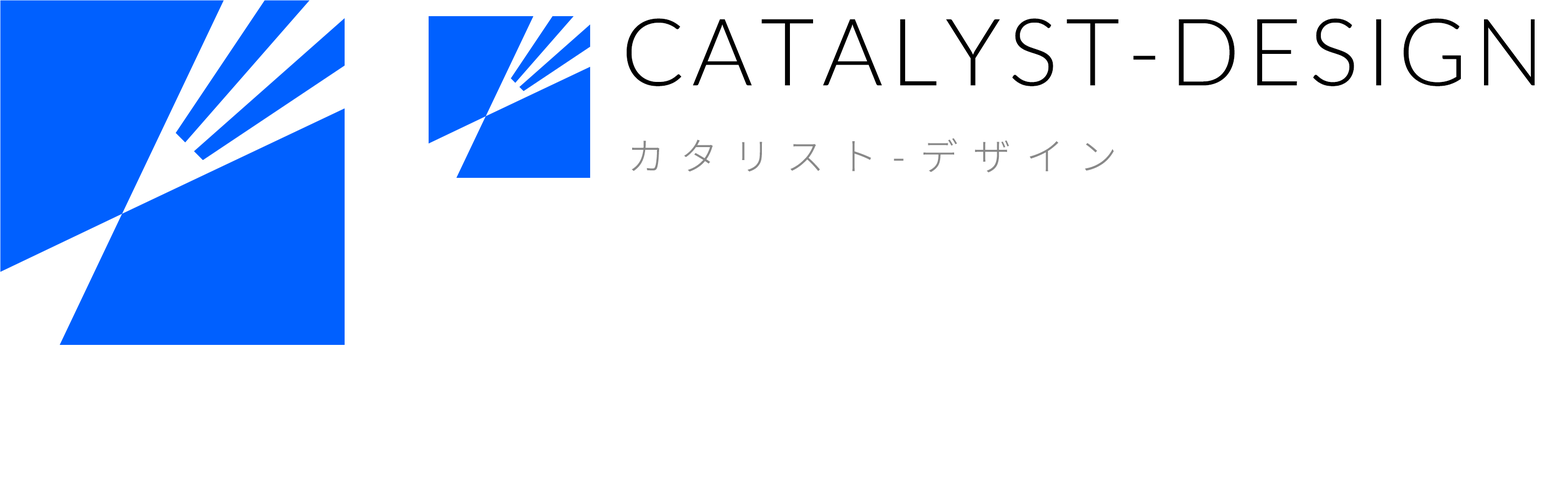
<style>
.page{position:relative;width:1568px;height:485px;background:#ffffff}
.page>*{position:absolute;margin:0}
.t1{font:93.3px "Lato-Light";letter-spacing:0.08em;color:#000000}
.t2{font:37.9px "NotoSansCJKjp-Light";letter-spacing:0.4em;color:#888888}
</style>
<div class="page">
<p class="t1" style="left:626px;top:18px;width:909px;height:68px">CATALYST-DESIGN</p>
<p class="t2" style="left:632px;top:138px;width:482px;height:34px">カタリスト-デザイン</p>
</div>
